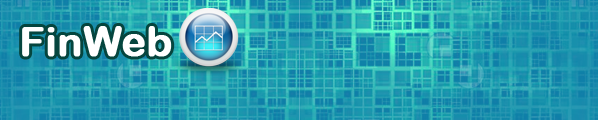
<style>
.page{position:relative;width:598px;height:120px}
.page>*{position:absolute;margin:0}
.t1{font:40.9px "ArialRoundedMTBold";color:#ffffff;font-weight:bold}
</style>
<div class="page">
<p class="t1" style="left:22px;top:26px;width:150px;height:31px">FinWeb</p>
</div>
